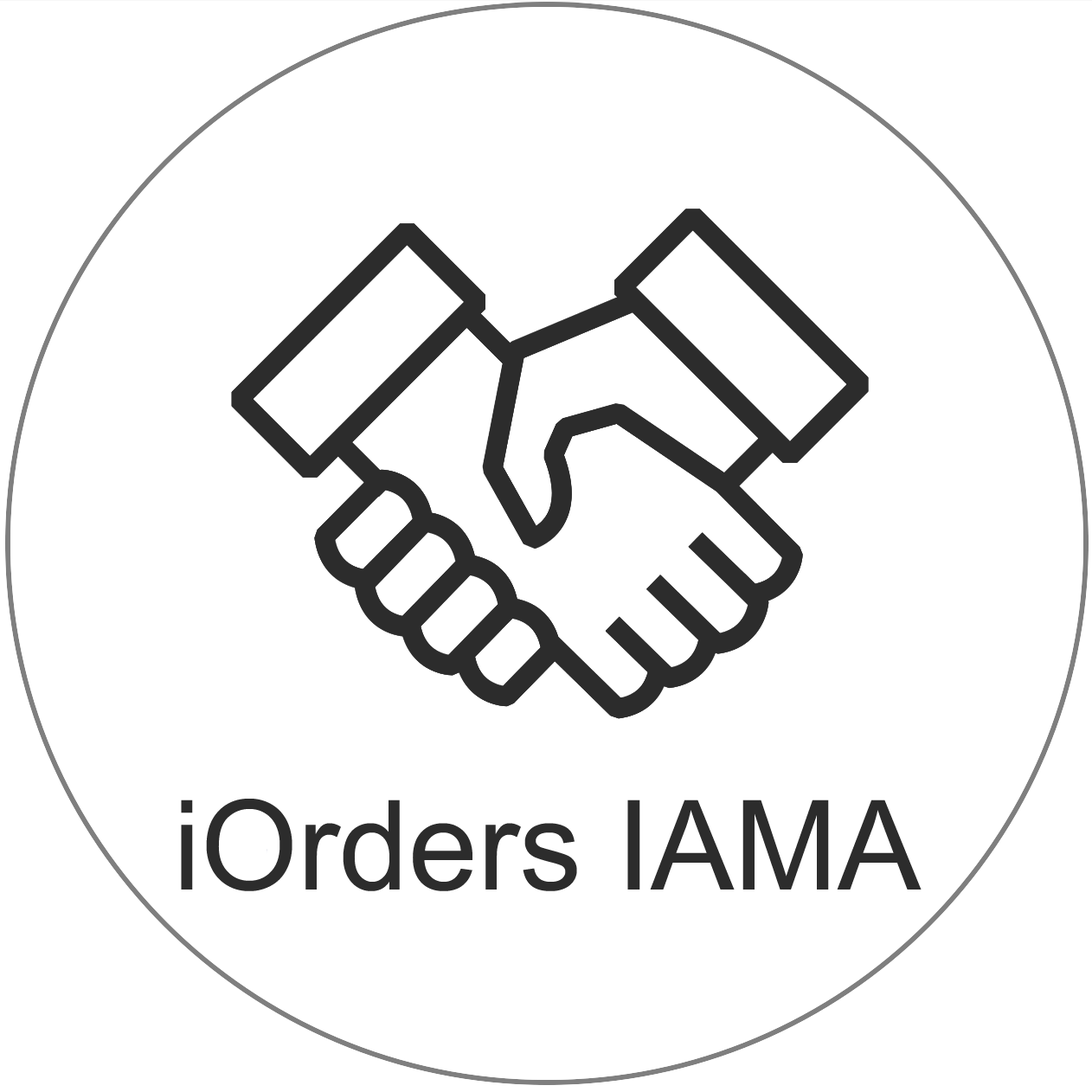
<style>
.page{position:relative;width:1092px;height:1092px;background:#ffffff}
.page>*{position:absolute;margin:0}
.t1{font:124.6px "ArialMT";color:#2c2c2c}
</style>
<div class="page">
<p class="t1" style="left:181px;top:799px;width:741px;height:92px">iOrders IAMA</p>
</div>
